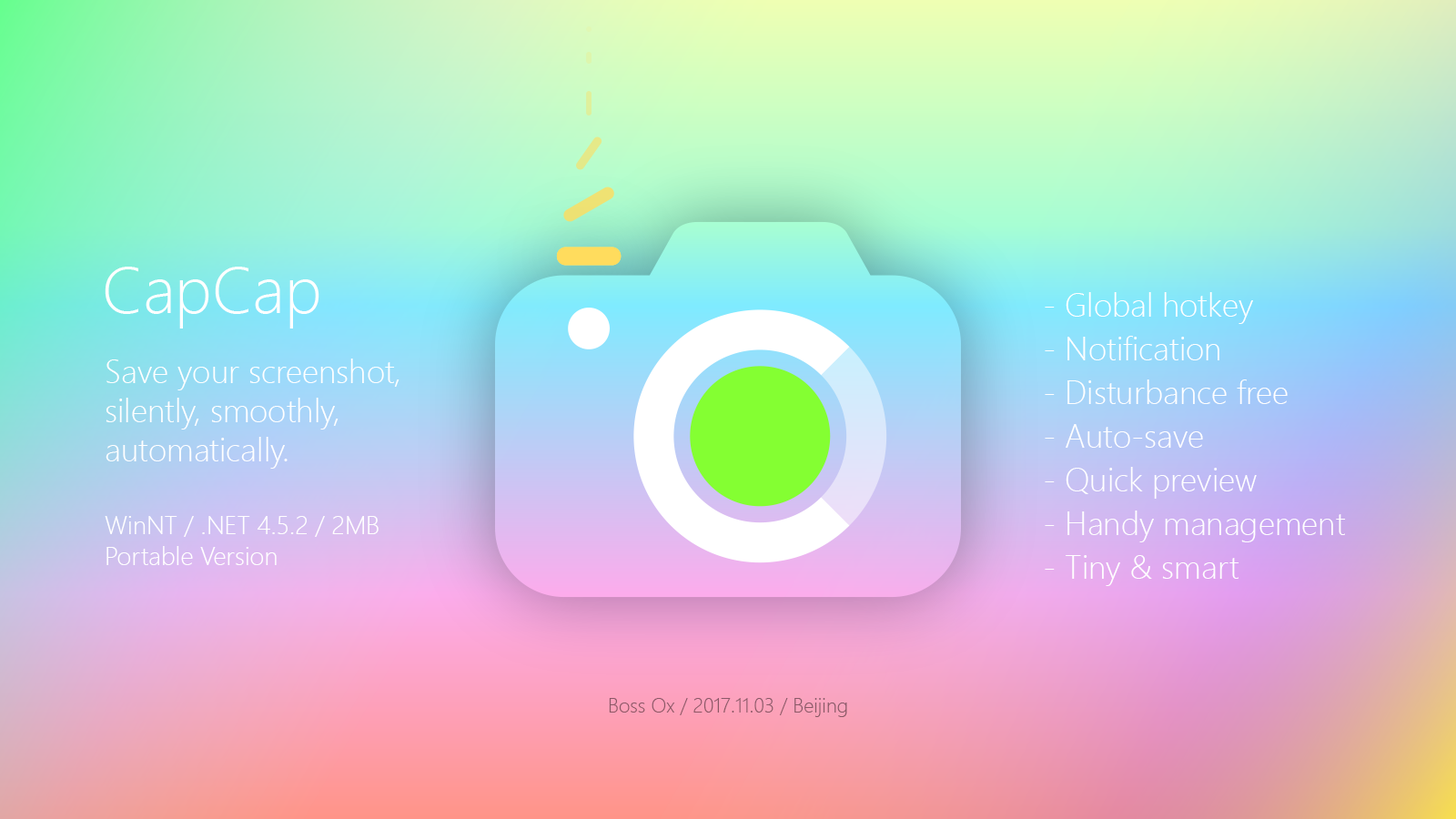
<style>
.page{position:relative;width:1456px;height:819px}
.page>*{position:absolute;margin:0}
.t1{font:65.5px "SegoeUI-Light";color:#ffffff}
.t2{font:32.8px/43.7px "SegoeUI-Light";color:#ffffff}
.t3{font:32.8px "SegoeUI-Light";color:#ffffff}
.t4{font:25.5px "SegoeUI-Light";color:#ffffff}
.t5{font:20px "SegoeUI-Light";color:#8b5867}
</style>
<div class="page">
<p class="t1" style="left:105px;top:267px;width:214px;height:62px">CapCap</p>
<p class="t2" style="left:1045px;top:292px;width:301px;height:294px">- Global hotkey<br>- Notification<br>- Disturbance free<br>- Auto-save<br>- Quick preview<br>- Handy management<br>- Tiny &amp; smart</p>
<p class="t3" style="left:106px;top:359px;width:293px;height:110px">Save your screenshot,<br>silently, smoothly,<br>automatically.</p>
<p class="t4" style="left:105px;top:516px;width:274px;height:49px">WinNT / .NET 4.5.2 / 2MB<br>Portable Version</p>
<p class="t5" style="left:609px;top:698px;width:238px;height:19px">Boss Ox / 2017.11.03 / Beijing</p>
</div>
